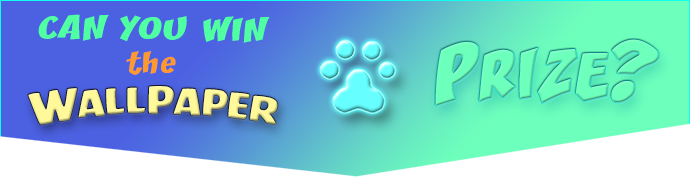
<style>
.page{position:relative;width:690px;height:177px}
.page>*{position:absolute;margin:0}
.t1{font:28.4px "CCZoinks";letter-spacing:0.06em;color:#50ffa2;scale:1.43 1}
.t2{font:47.6px "CCZoinks";letter-spacing:0.06em;color:#6dffbc;scale:1.44 1}
.t3{font:64.6px "CCZoinks";letter-spacing:0.06em;color:#6dffbc;scale:1.44 1}
.t4{font:70.3px "CCZoinks";letter-spacing:0.06em;color:#6dffbc;scale:1.44 1}
.t5{font:25.7px "CCZoinks";letter-spacing:0.06em;color:#fd992e;scale:1.42 1}
.t6{font:31.6px "CCBattleCry";color:#fff999;scale:1.44 1}
.t7{font:41.5px "CCZoinks";letter-spacing:0.06em;color:#50ffa2;scale:1.44 1}
.t8{font:38.7px "CCBattleCry";letter-spacing:-0.02em;color:#fff999;scale:1.44 1}
.t9{font:33.3px "CCBattleCry";color:#fff999;scale:1.44 1}
</style>
<div class="page">
<p class="t1" style="left:38px;top:14px;width:232px;height:29px;rotate:1deg">CAN YOU WIN</p>
<p class="t2" style="left:435px;top:39px;width:224px;height:67px;rotate:1deg"><span class="t3">P</span>RIZE<span class="t4">?</span></p>
<p class="t5" style="left:126px;top:51px;width:50px;height:24px;rotate:1deg">the</p>
<p class="t6" style="left:28px;top:86px;width:250px;height:39px;rotate:-4deg"><span class="t7">   </span><span class="t8">w</span>all<span class="t9">p</span>aper</p>
</div>
